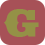
<style>
.page{position:relative;width:45px;height:45px;background:#a75157}
.page>*{position:absolute;margin:0}
.t1{font:50px "Saddlebag-Black";color:#949146}
</style>
<div class="page">
<p class="t1" style="left:4px;top:9px;width:35px;height:28px">G</p>
</div>
